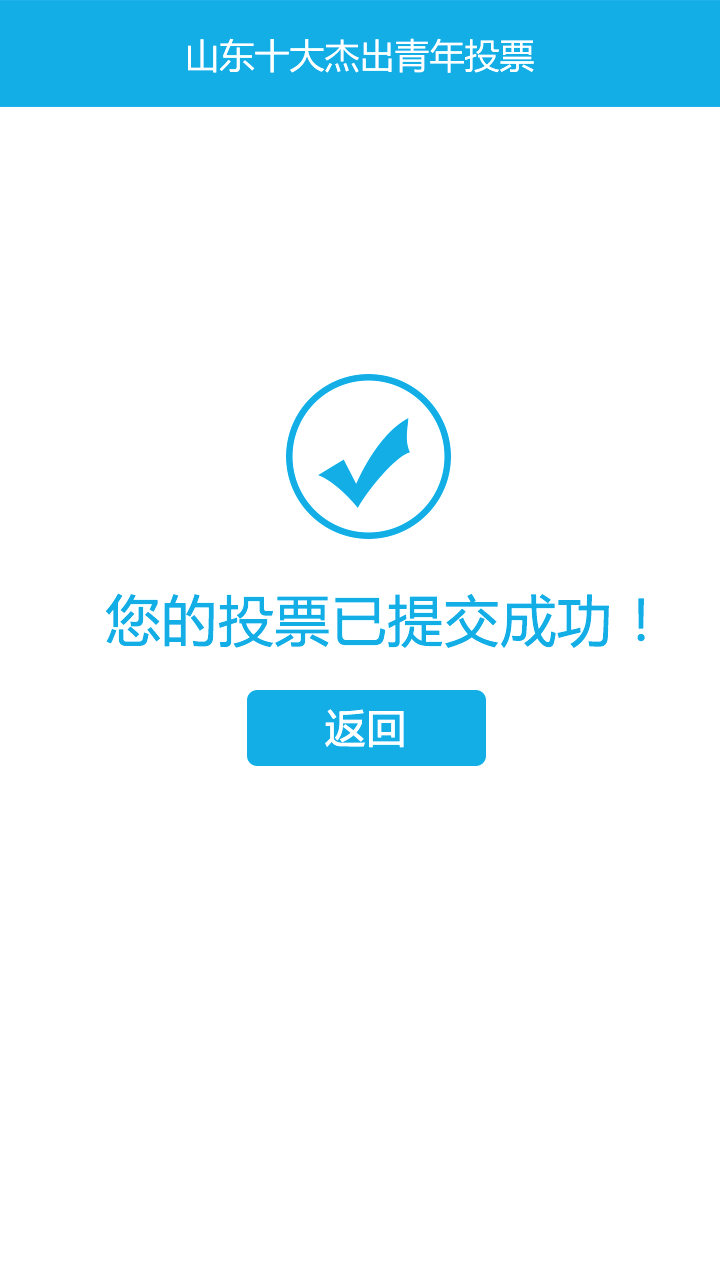
<style>
.page{position:relative;width:720px;height:1280px;background:#ffffff}
.page>*{position:absolute;margin:0}
.t1{font:35px "MicrosoftYaHei";color:#ffffff}
.t2{font:55px "MicrosoftYaHei";color:#14aee7;font-weight:bold}
.t3{font:40px "MicrosoftYaHei";color:#ffffff;font-weight:bold}
</style>
<div class="page">
<p class="t1" style="left:188px;top:38px;width:346px;height:35px">山东十大杰出青年投票</p>
<p class="t2" style="left:105px;top:593px;width:540px;height:55px">您的投票已提交成功！</p>
<p class="t3" style="left:325px;top:709px;width:79px;height:39px">返回</p>
</div>
